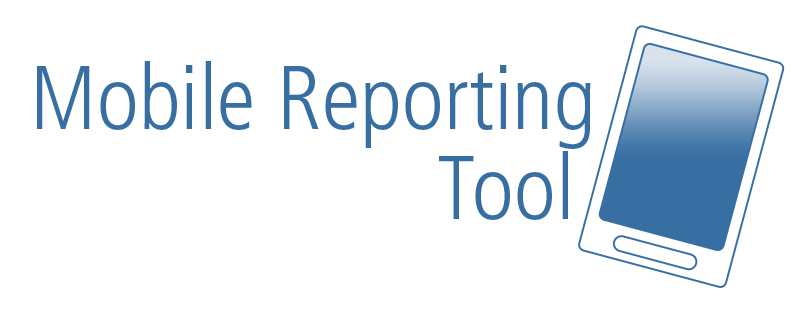
<style>
.page{position:relative;width:807px;height:316px;background:#ffffff}
.page>*{position:absolute;margin:0}
.t1{font:90px/90px "FrutigerLTStd-LightCn";color:#386fa3}
.t2{font:60px/60px "FrutigerLTStd-Light";color:#386fa3}
</style>
<div class="page">
<p class="t1" style="left:37px;top:61px;width:554px;height:159px;text-align:right"><span class="t2">  </span>Mobile Reporting<br>  Tool</p>
</div>
